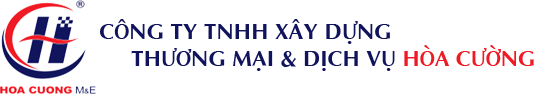
<style>
.page{position:relative;width:534px;height:94px;background:#ffffff}
.page>*{position:absolute;margin:0}
.t1{font:22px "SVN-Aptimabold";color:#11145d}
.t2{font:22px "SVN-Aptimabold";color:#ee1a24}
</style>
<div class="page">
<p class="t1" style="left:100px;top:19px;width:434px;height:52px">CÔNG TY TNHH XÂY DỰNG <br>     THƯƠNG MẠI &amp; DỊCH VỤ <span class="t2">HÒA CƯỜNG</span></p>
</div>
